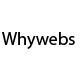
<style>
.page{position:relative;width:80px;height:83px;background:#ffffff}
.page>*{position:absolute;margin:0}
.t1{font:18px "MyriadPro-Regular";color:#000000}
</style>
<div class="page">
<p class="t1" style="left:2px;top:32px;width:73px;height:17px">Whywebs</p>
</div>
